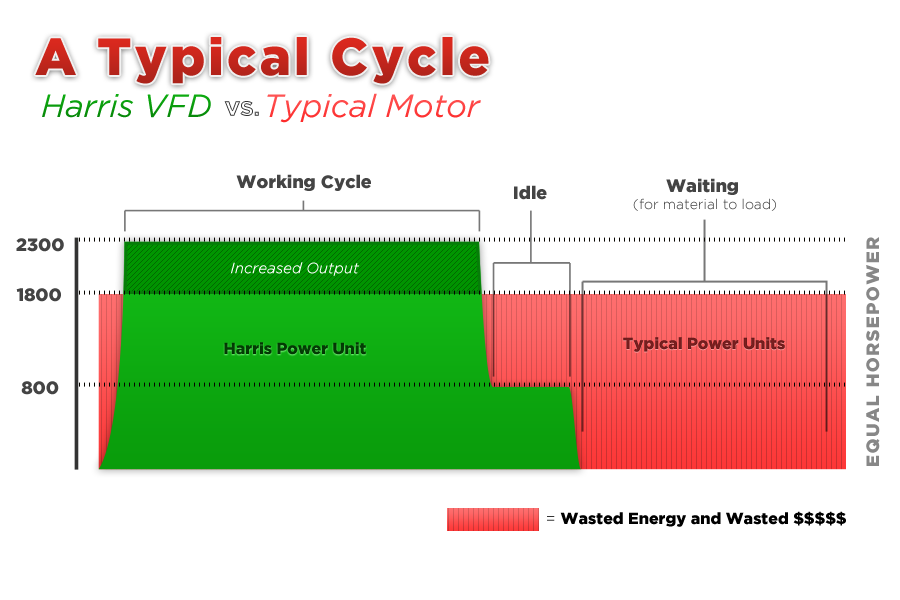
<style>
.page{position:relative;width:900px;height:600px;background:#ffffff}
.page>*{position:absolute;margin:0}
.t1{font:52px "GothamBlack";letter-spacing:0.06em;color:#c5261c}
.t2{font:32px "GothamBook-Italic";color:#fe5454}
.t3{font:32px "GothamBook-Italic";color:#0dab10}
.t4{font:20.7px "GothamBlack"}
.t5{font:18px "GothamBlack";color:#444444}
.t6{font:14px/17px "GothamLight";color:#444444}
.t7{font:18px/161px "GothamBlack";color:#444444}
.t8{font:18px "GothamBlack";letter-spacing:0.08em;color:#878787;text-transform:uppercase}
.t9{font:14.9px "GothamBook-Italic";color:#ffffff}
.t10{font:16px "GothamBlack";color:#054b06}
.t11{font:16px "GothamBlack";color:#7c1f1f}
.t12{font:16px "GothamBlack";color:#000000}
.t13{font:16px "GothamBook";color:#343434}
</style>
<div class="page">
<p class="t1" style="left:35px;top:37px;width:454px;height:47px">A Typical Cycle</p>
<p class="t2" style="left:42px;top:93px;width:439px;height:30px"><span class="t3">Harris VFD</span>Typical Motor</p>
<p class="t4" style="left:224px;top:101px;width:35px;height:15px">VS.</p>
<p class="t5" style="left:236px;top:174px;width:135px;height:17px">Working Cycle</p>
<p class="t5" style="left:514px;top:185px;width:33px;height:15px">Idle</p>
<p class="t6" style="left:633px;top:178px;width:143px;height:33px;text-align:center"><span class="t7">Waiting <br></span>(for material to load)</p>
<p class="t5" style="left:16px;top:238px;width:48px;height:14px">2300</p>
<p class="t8" style="left:866px;top:237px;width:14px;height:229px;rotate:-90deg">Equal Horsepower</p>
<p class="t9" style="left:230px;top:262px;width:130px;height:14px">Increased Output</p>
<p class="t5" style="left:16px;top:288px;width:45px;height:14px">1800</p>
<p class="t10" style="left:224px;top:342px;width:142px;height:13px">Harris Power Unit</p>
<p class="t11" style="left:623px;top:337px;width:162px;height:15px">Typical Power Units</p>
<p class="t5" style="left:21px;top:381px;width:38px;height:14px">800</p>
<p class="t12" style="left:547px;top:511px;width:299px;height:16px"><span class="t13">= </span>Wasted Energy and Wasted $$$$$</p>
</div>
